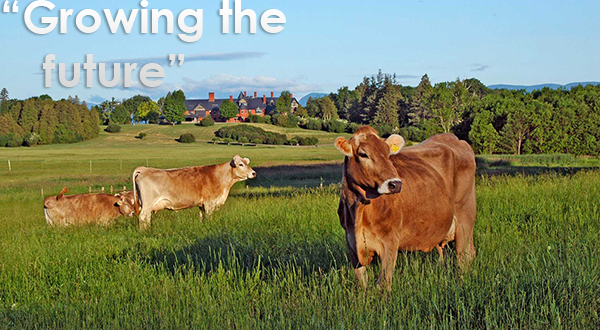
<style>
.page{position:relative;width:600px;height:330px}
.page>*{position:absolute;margin:0}
.t1{font:45px "CenturyGothic-Bold";color:#ffffff}
</style>
<div class="page">
<p class="t1" style="left:3px;top:0px;width:283px;height:87px">“Growing the<br>  future”</p>
</div>
